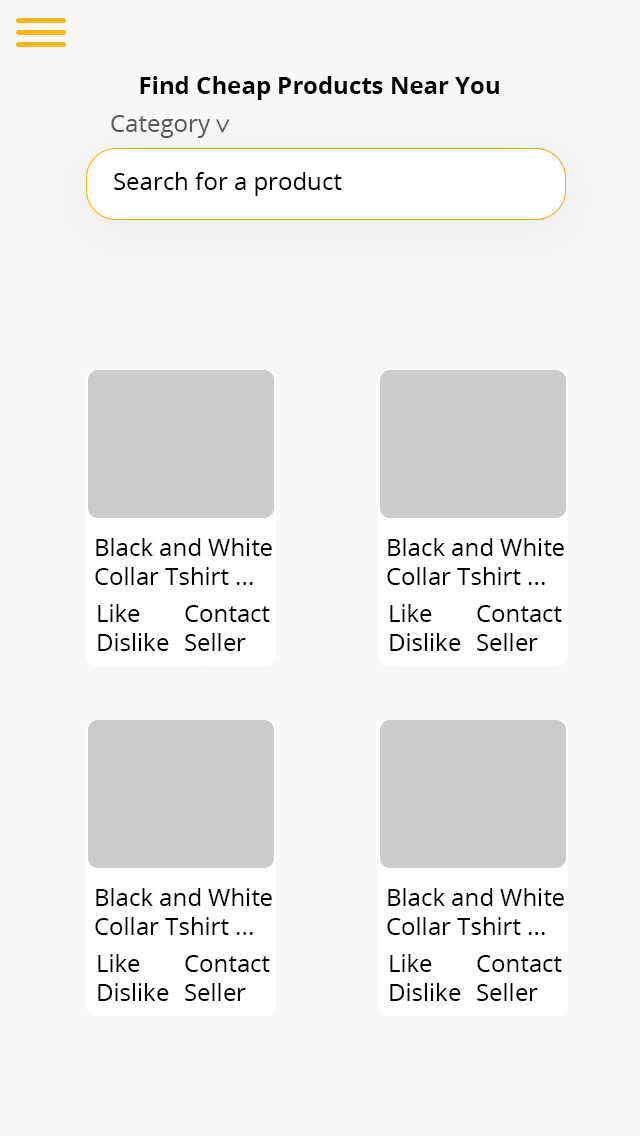
<style>
.page{position:relative;width:640px;height:1136px;background:#f8f8f8}
.page>*{position:absolute;margin:0}
.t1{font:24px "OpenSans-Bold";color:#000000}
.t2{font:24px "OpenSans-Regular";color:#59595a}
.t3{font:27.5px "OpenSans-Regular";color:#59595a}
.t4{font:24px "OpenSans-Regular";color:#000000}
</style>
<div class="page">
<p class="t1" style="left:140px;top:76px;width:359px;height:24px">Find Cheap Products Near You</p>
<p class="t2" style="left:111px;top:115px;width:99px;height:23px">Category</p>
<p class="t3" style="left:216px;top:119px;width:14px;height:14px;rotate:90deg">&gt;</p>
<p class="t4" style="left:114px;top:172px;width:228px;height:24px">Search for a product</p>
<p class="t4" style="left:95px;top:538px;width:177px;height:47px">Black and White<br>Collar Tshirt ...</p>
<p class="t4" style="left:387px;top:538px;width:177px;height:47px">Black and White<br>Collar Tshirt ...</p>
<p class="t4" style="left:98px;top:604px;width:71px;height:47px">Like<br>Dislike</p>
<p class="t4" style="left:185px;top:605px;width:85px;height:46px">Contact<br>Seller</p>
<p class="t4" style="left:390px;top:604px;width:71px;height:47px">Like<br>Dislike</p>
<p class="t4" style="left:477px;top:605px;width:85px;height:46px">Contact<br>Seller</p>
<p class="t4" style="left:95px;top:888px;width:177px;height:47px">Black and White<br>Collar Tshirt ...</p>
<p class="t4" style="left:387px;top:888px;width:177px;height:47px">Black and White<br>Collar Tshirt ...</p>
<p class="t4" style="left:98px;top:954px;width:71px;height:47px">Like<br>Dislike</p>
<p class="t4" style="left:185px;top:955px;width:85px;height:46px">Contact<br>Seller</p>
<p class="t4" style="left:390px;top:954px;width:71px;height:47px">Like<br>Dislike</p>
<p class="t4" style="left:477px;top:955px;width:85px;height:46px">Contact<br>Seller</p>
</div>
